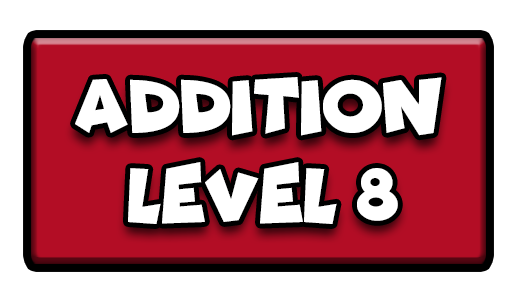
<style>
.page{position:relative;width:517px;height:301px;background:#ffffff}
.page>*{position:absolute;margin:0}
.t1{font:77.7px "Funhouse";color:#ffffff;scale:0.95 1}
</style>
<div class="page">
<p class="t1" style="left:75px;top:77px;width:367px;height:59px">ADDITION</p>
<p class="t1" style="left:128px;top:162px;width:270px;height:62px">LEVEL 8</p>
</div>
